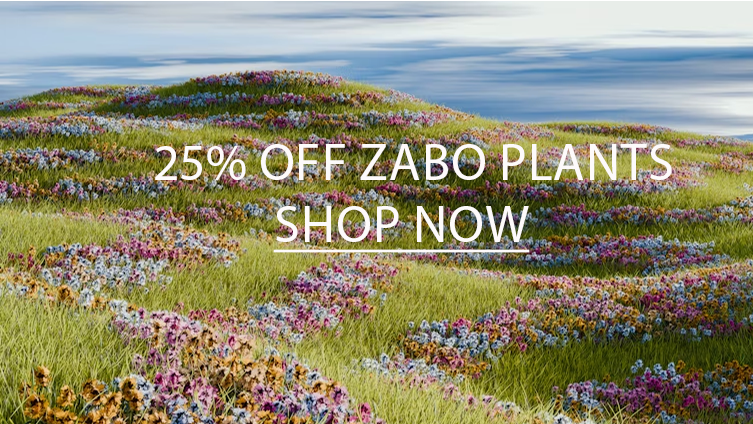
<style>
.page{position:relative;width:753px;height:424px}
.page>*{position:absolute;margin:0}
.t1{font:52px "MyriadPro-Regular";color:#fdfafa;text-transform:uppercase}
.t2{font:52px "MyriadPro-Regular";color:#fdfafa;text-transform:uppercase;text-decoration:underline}
</style>
<div class="page">
<p class="t1" style="left:155px;top:144px;width:517px;height:109px">25% off Zabo plants<br>           <span class="t2">Shop Now</span></p>
</div>
